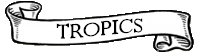
<style>
.page{position:relative;width:204px;height:52px;background:#ffffff}
.page>*{position:absolute;margin:0}
.t1{font:24px "Perpetua";color:#000000}
</style>
<div class="page">
<p class="t1" style="left:56px;top:18px;width:87px;height:21px">TROPICS</p>
</div>
